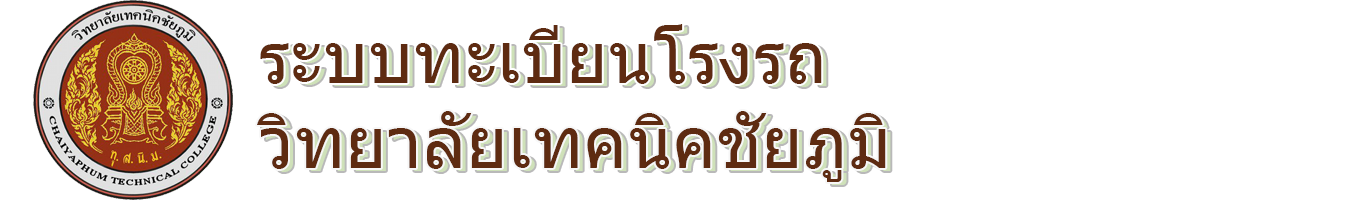
<style>
.page{position:relative;width:1366px;height:200px;background:#ffffff}
.page>*{position:absolute;margin:0}
.t1{font:72px "Tahoma";color:#5e2b11}
</style>
<div class="page">
<p class="t1" style="left:260px;top:24px;width:562px;height:60px">ระบบทะเบียนโรงรถ</p>
<p class="t1" style="left:257px;top:111px;width:629px;height:71px">วิทยาลัยเทคนิคชัยภูมิ</p>
</div>
